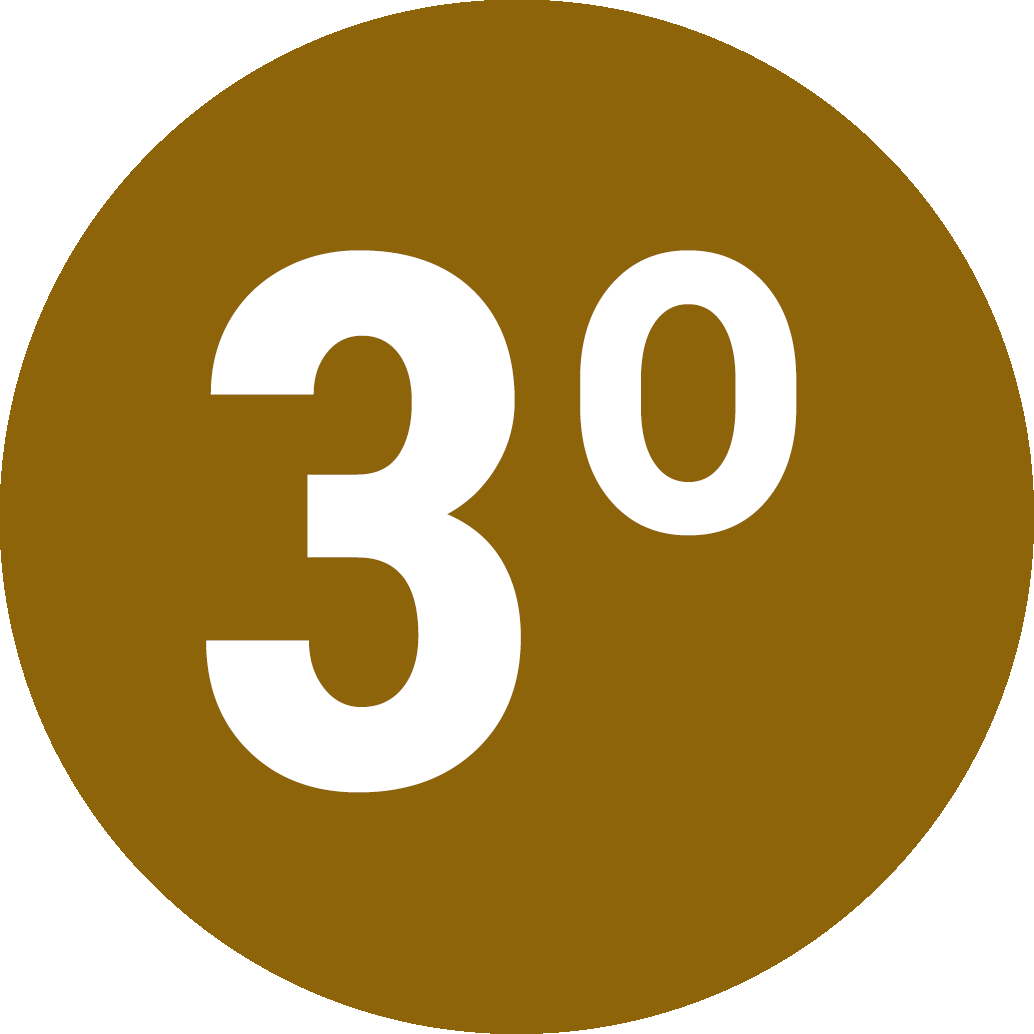
<style>
.page{position:relative;width:1034px;height:1034px;background:#8e640b}
.page>*{position:absolute;margin:0}
.t1{font:741.7px "RobotoCondensed-Bold";letter-spacing:-0.025em;color:#ffffff}
</style>
<div class="page">
<p class="t1" style="left:206px;top:250px;width:591px;height:543px">3º</p>
</div>
